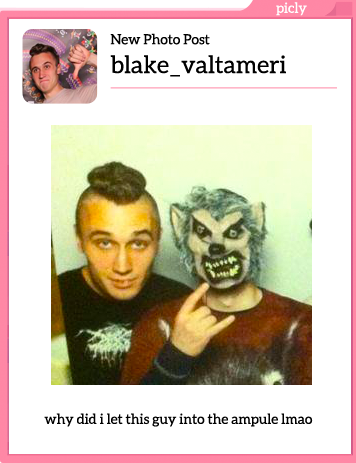
<style>
.page{position:relative;width:356px;height:463px;background:#ffffff}
.page>*{position:absolute;margin:0}
.t1{font:14px "Aleo-Regular";color:#ffffff}
.t2{font:24px "Aleo-Regular";color:#000000}
.t3{font:14px "Aleo-Regular";color:#000000}
</style>
<div class="page">
<p class="t1" style="left:276px;top:2px;width:31px;height:14px">picly</p>
<p class="t2" style="left:110px;top:33px;width:176px;height:44px"><span class="t3">New Photo Post<br></span>blake_valtameri</p>
<p class="t3" style="left:44px;top:413px;width:269px;height:14px">why did i let this guy into the ampule lmao</p>
</div>
